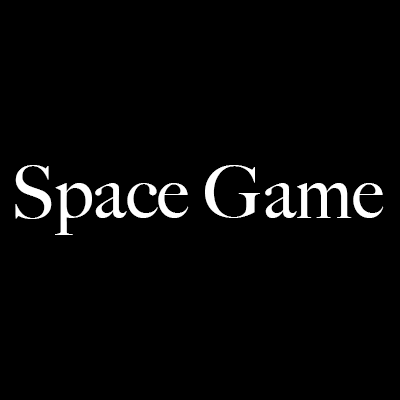
<style>
.page{position:relative;width:400px;height:400px;background:#000000}
.page>*{position:absolute;margin:0}
.t1{font:72px "BigCaslon-Medium";color:#ffffff}
</style>
<div class="page">
<p class="t1" style="left:15px;top:165px;width:369px;height:70px">Space Game</p>
</div>
